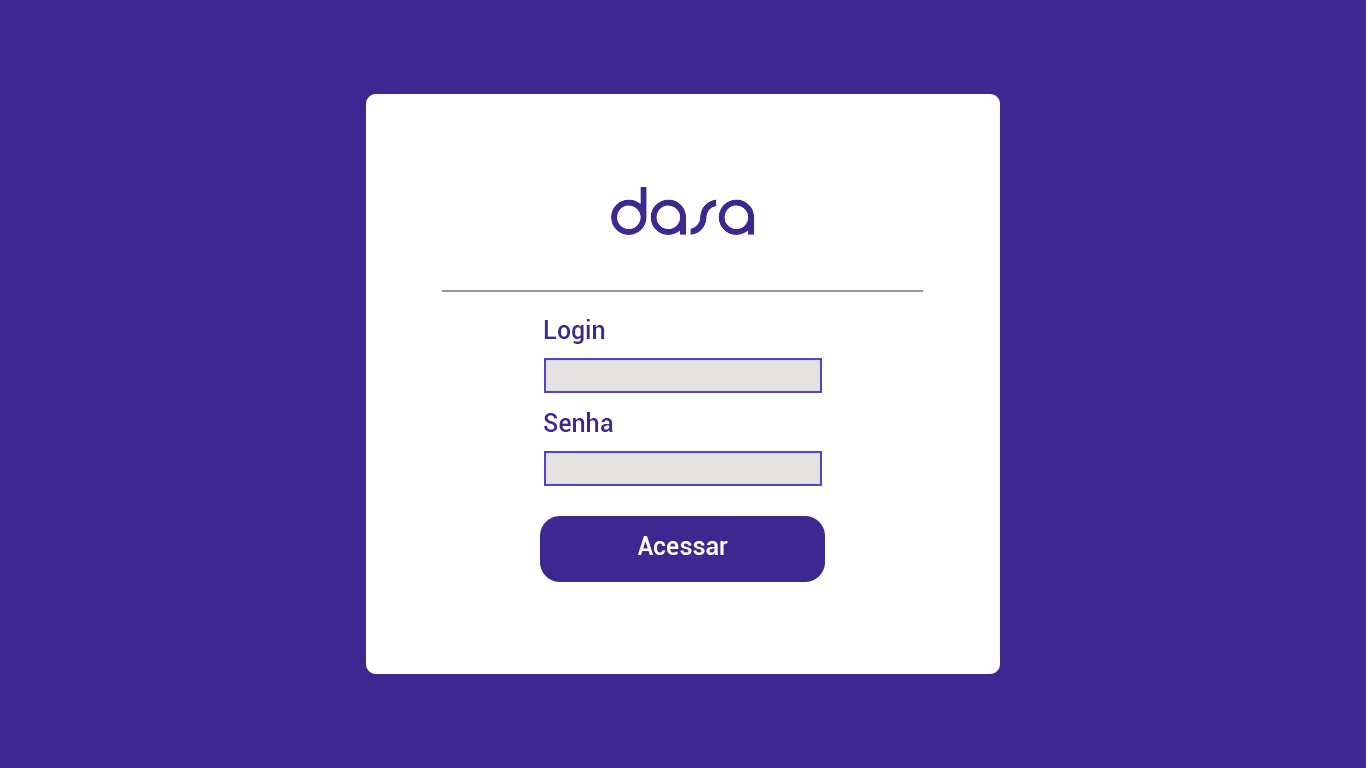
<style>
.page{position:relative;width:1366px;height:768px;background:#3d2892}
.page>*{position:absolute;margin:0}
.t1{font:25px "Roboto-Medium";color:#3d2892}
.t2{font:25px "Roboto-Medium";color:#ffffff}
</style>
<div class="page">
<p class="t1" style="left:544px;top:319px;width:61px;height:25px">Login</p>
<p class="t1" style="left:544px;top:412px;width:69px;height:20px">Senha</p>
<p class="t2" style="left:638px;top:536px;width:90px;height:19px">Acessar</p>
</div>
